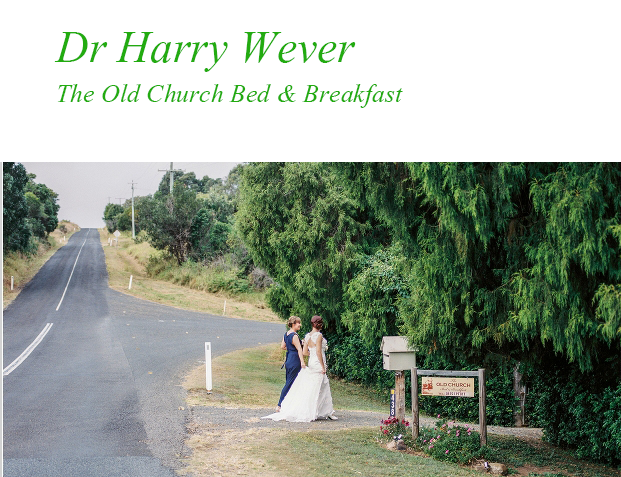
<style>
.page{position:relative;width:621px;height:477px;background:#ffffff}
.page>*{position:absolute;margin:0}
.t1{font:33.3px "Kokila-Italic";color:#22ab10}
.t2{font:58.3px "Kokila-Italic";color:#22ab10}
</style>
<div class="page">
<p class="t1" style="left:54px;top:32px;width:349px;height:76px"><span class="t2">Dr Harry Wever<br></span>The Old Church Bed &amp; Breakfast</p>
</div>
